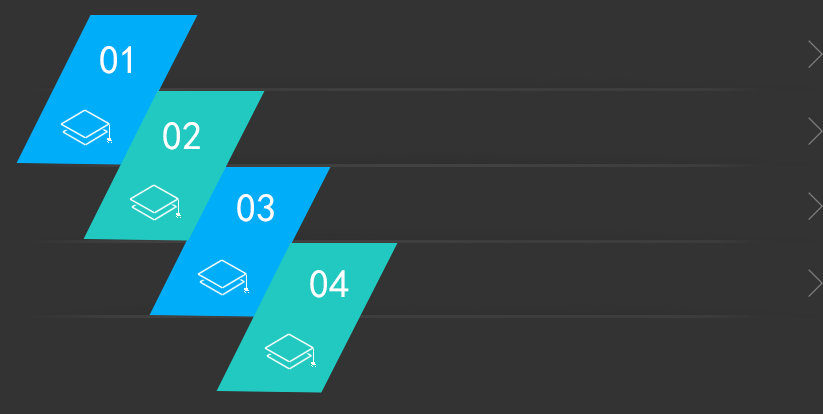
<style>
.page{position:relative;width:823px;height:414px;background:#333333}
.page>*{position:absolute;margin:0}
.t1{font:40px "SimSun";color:#7d7d7d}
.t2{font:40px "SimHei";color:#ffffff}
</style>
<div class="page">
<p class="t1" style="left:808px;top:40px;width:15px;height:28px">&gt;</p>
<p class="t2" style="left:100px;top:46px;width:31px;height:28px">01</p>
<p class="t2" style="left:163px;top:122px;width:37px;height:28px">02</p>
<p class="t1" style="left:808px;top:117px;width:15px;height:28px">&gt;</p>
<p class="t2" style="left:237px;top:194px;width:37px;height:28px">03</p>
<p class="t1" style="left:808px;top:192px;width:15px;height:28px">&gt;</p>
<p class="t2" style="left:310px;top:270px;width:39px;height:28px">04</p>
<p class="t1" style="left:808px;top:269px;width:15px;height:28px">&gt;</p>
</div>
